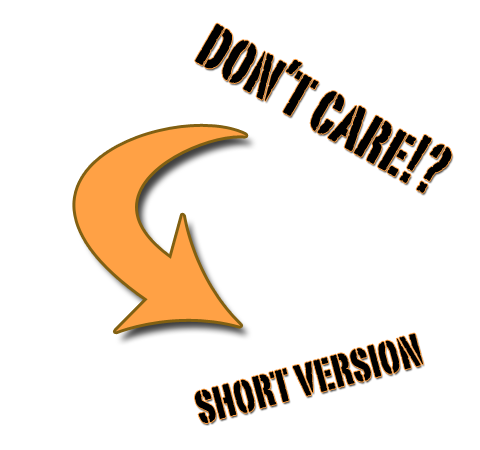
<style>
.page{position:relative;width:480px;height:450px;background:#ffffff}
.page>*{position:absolute;margin:0}
.t1{font:72px "PortagoITCTT";color:#000000}
.t2{font:53px "PortagoITCTT";color:#000000}
</style>
<div class="page">
<p class="t1" style="left:195px;top:23px;width:257px;height:170px;rotate:30deg">don’t care!?</p>
<p class="t2" style="left:195px;top:333px;width:228px;height:90px;rotate:-15deg">short version</p>
</div>
